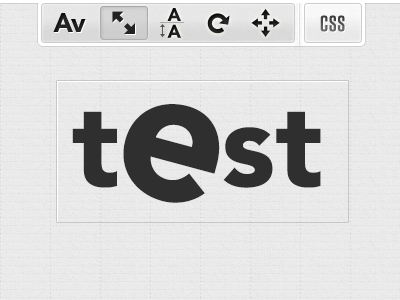
<style>
.page{position:relative;width:400px;height:300px;background:#eaeaea}
.page>*{position:absolute;margin:0}
.t1{font:117.8px "AvenirLTStd-Black";color:#2f2f2f}
.t2{font:192.1px "AvenirLTStd-Black";color:#2f2f2f}
</style>
<div class="page">
<p class="t1" style="left:72px;top:111px;width:45px;height:77px">t</p>
<p class="t2" style="left:123px;top:104px;width:97px;height:99px;rotate:15deg">e</p>
<p class="t1" style="left:276px;top:111px;width:45px;height:77px">t</p>
<p class="t1" style="left:223px;top:127px;width:50px;height:61px">s</p>
</div>
